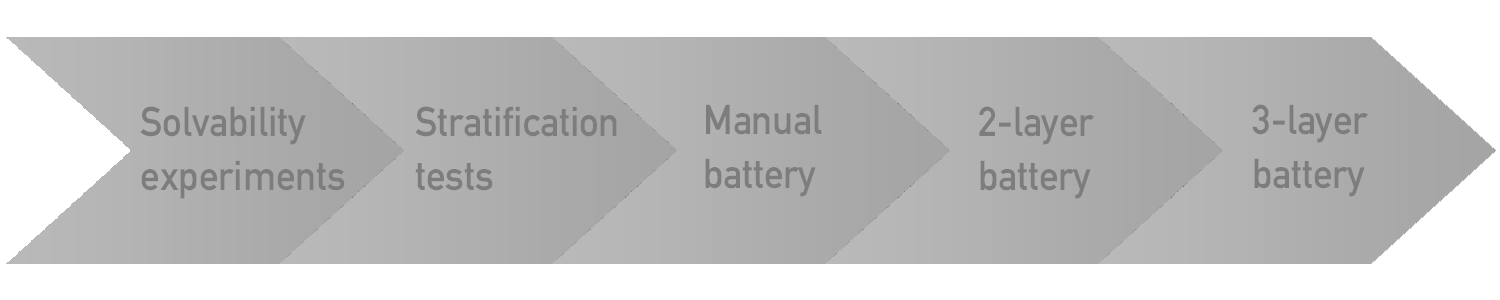
<style>
.page{position:relative;width:1500px;height:300px;background:#ffffff}
.page>*{position:absolute;margin:0}
.t1{font:41px/53.4px "DIN-1451-Mittelschrift-Regular";color:#7d7d7d;scale:0.95 1}
</style>
<div class="page">
<p class="t1" style="left:140px;top:106px;width:205px;height:93px">Solvability<br>experiments</p>
<p class="t1" style="left:415px;top:106px;width:202px;height:85px">Stratification<br>tests</p>
<p class="t1" style="left:705px;top:104px;width:117px;height:93px">Manual<br>battery</p>
<p class="t1" style="left:979px;top:106px;width:115px;height:93px">2-layer<br>battery</p>
<p class="t1" style="left:1252px;top:104px;width:116px;height:93px">3-layer<br>battery</p>
</div>
